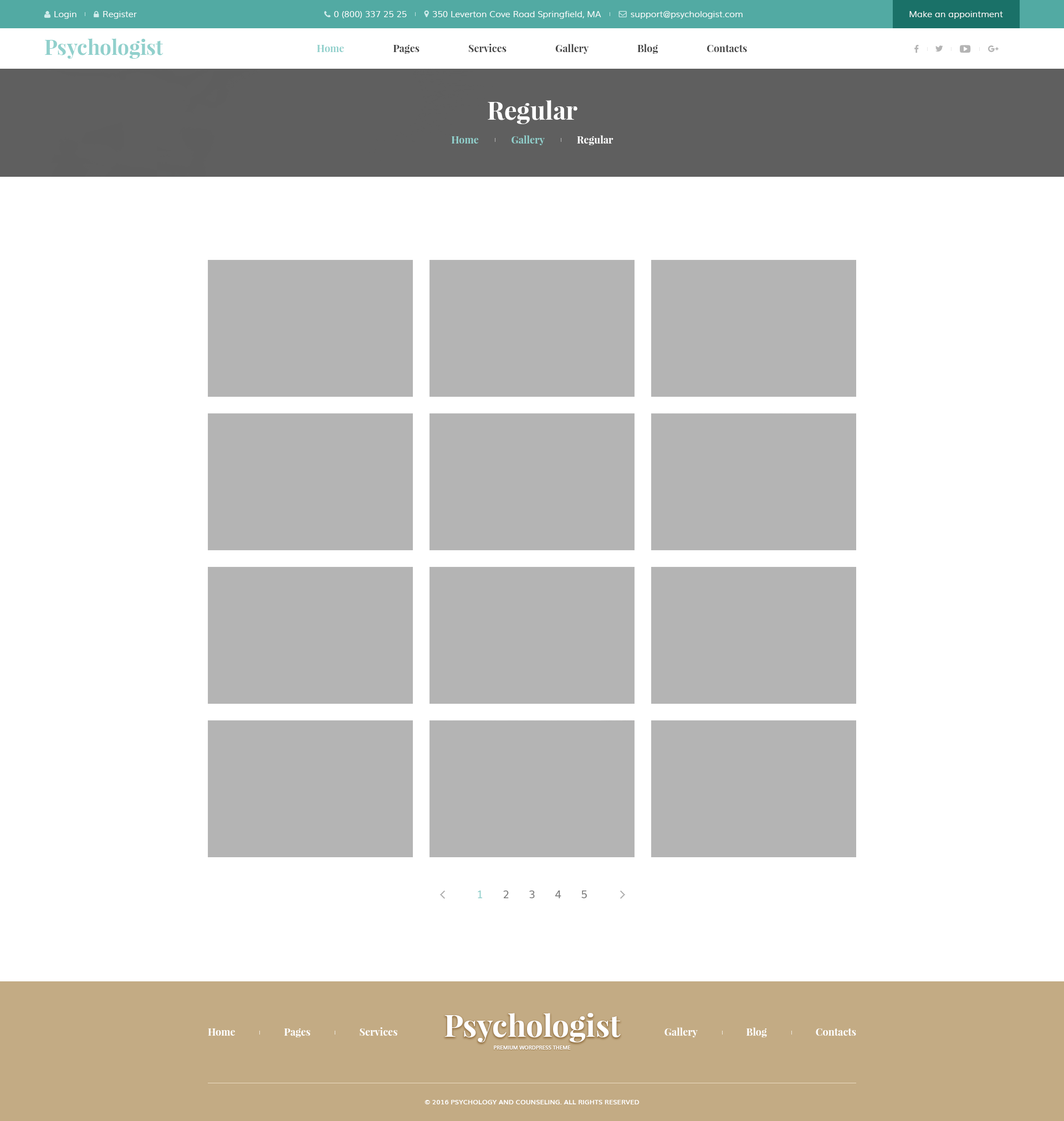
<style>
.page{position:relative;width:1064px;height:1121px;background:#ffffff}
.page>*{position:absolute;margin:0}
.t1{font:8.9px "Muli-Light";color:#ffffff}
.t2{font:20.5px "PlayfairDisplay-Bold";color:#91d0cc}
.t3{font:10px "PlayfairDisplay-Bold";color:#444444}
.t4{font:10px "PlayfairDisplay-Bold";color:#91d0cc}
.t5{font:24.9px "PlayfairDisplay-Bold";color:#ffffff}
.t6{font:10px "PlayfairDisplay-Bold";color:#ffffff}
.t7{font:11.1px "Muli";color:#787878}
.t8{font:11.1px "Muli";color:#91d0cc}
.t9{font:30.5px "PlayfairDisplay-Bold";color:#ffffff}
.t10{font:5px "Muli-Bold";color:#ffffff;text-transform:uppercase}
.t11{font:6.6px "Muli-Bold";color:#ffffff;text-transform:uppercase}
</style>
<div class="page">
<p class="t1" style="left:54px;top:11px;width:22px;height:8px">Login</p>
<p class="t1" style="left:103px;top:11px;width:34px;height:8px">Register</p>
<p class="t1" style="left:334px;top:11px;width:73px;height:7px">0 (800) 337 25 25</p>
<p class="t1" style="left:432px;top:11px;width:169px;height:8px">350 Leverton Cove Road Springfield, MA</p>
<p class="t1" style="left:631px;top:11px;width:111px;height:8px">support@psychologist.com</p>
<p class="t1" style="left:909px;top:11px;width:94px;height:8px">Make an appointment</p>
<p class="t2" style="left:45px;top:38px;width:118px;height:21px">Psychologist</p>
<p class="t3" style="left:317px;top:44px;width:430px;height:10px"><span class="t4">Home</span>                     Pages                     Services                     Gallery                     Blog                     Contacts</p>
<p class="t5" style="left:488px;top:100px;width:89px;height:24px">Regular</p>
<p class="t4" style="left:451px;top:135px;width:162px;height:10px">Home              Gallery              <span class="t6">Regular</span></p>
<p class="t7" style="left:478px;top:890px;width:109px;height:8px"><span class="t8">1      </span>2      3      4      5</p>
<p class="t9" style="left:444px;top:1013px;width:177px;height:29px">Psychologist</p>
<p class="t6" style="left:208px;top:1027px;width:189px;height:10px">Home                     Pages                     Services</p>
<p class="t6" style="left:664px;top:1027px;width:192px;height:10px">Gallery                     Blog                     Contacts</p>
<p class="t10" style="left:494px;top:1046px;width:77px;height:3px">Premium Wordpress Theme</p>
<p class="t11" style="left:424px;top:1100px;width:215px;height:4px">© 2016 Psychology and Counseling. All rights reserved</p>
</div>
